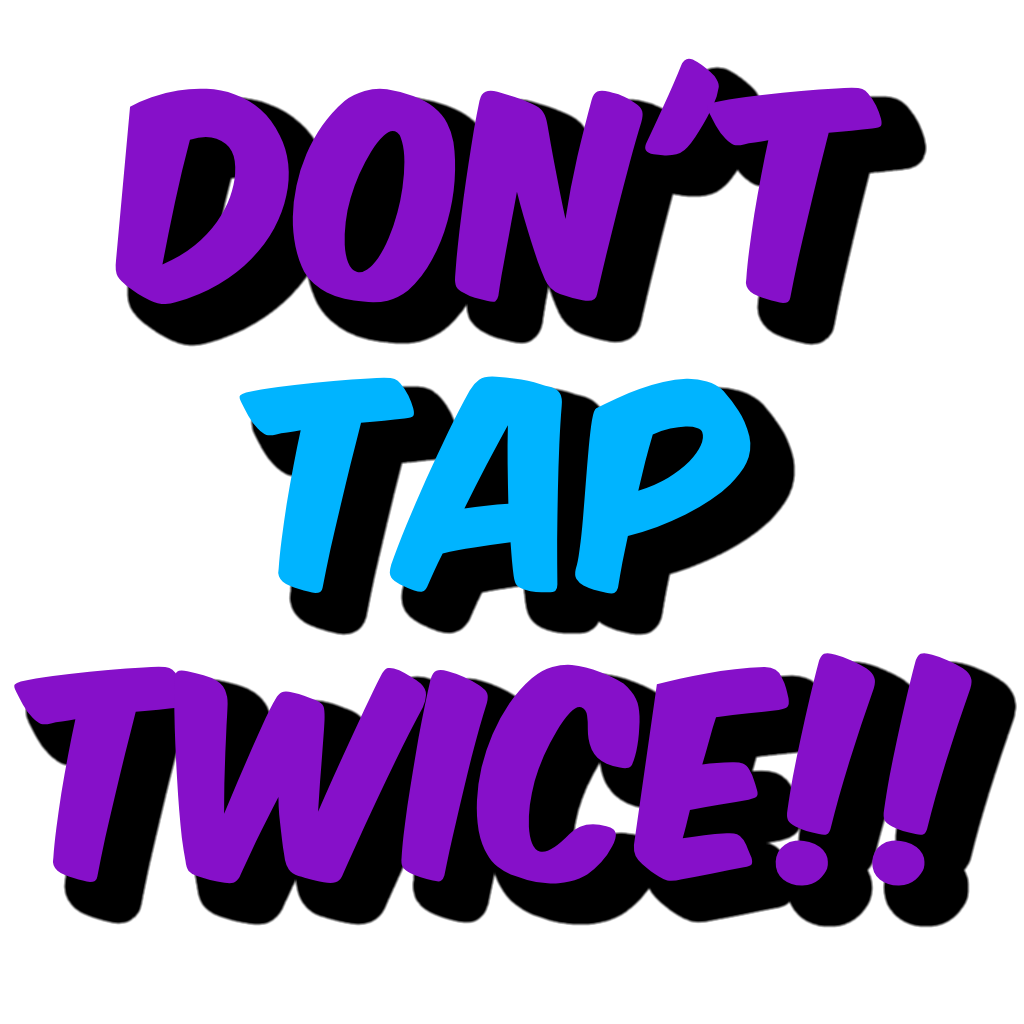
<style>
.page{position:relative;width:1024px;height:1024px;background:#ffffff}
.page>*{position:absolute;margin:0}
.t1{font:241.5px "KomikaAxis";color:#8610c9}
.t2{font:241.5px "KomikaAxis";color:#00b4ff}
</style>
<div class="page">
<p class="t1" style="left:14px;top:58px;width:958px;height:828px;text-align:center">Don't<br><span class="t2">TAP<br></span>TWICE!!</p>
</div>
